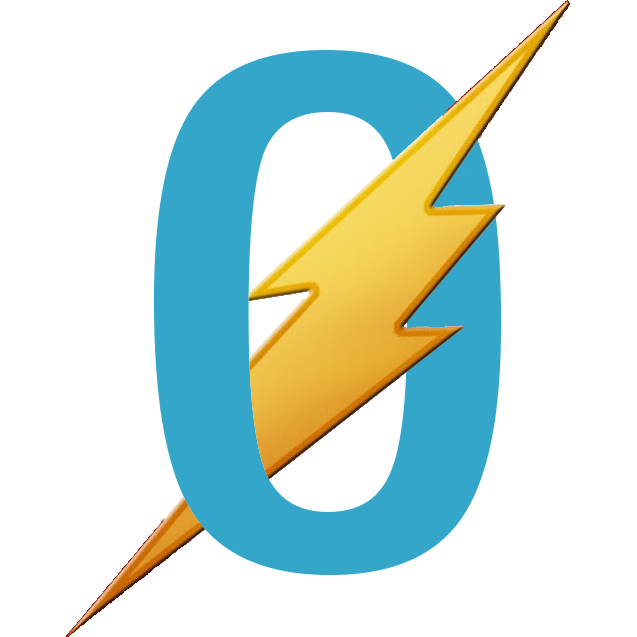
<style>
.page{position:relative;width:637px;height:637px;background:#ffffff}
.page>*{position:absolute;margin:0}
.t1{font:680px "Futura-CondensedMedium";letter-spacing:-0.025em;color:#33a6c9;scale:1.3 1}
</style>
<div class="page">
<p class="t1" style="left:153px;top:50px;width:349px;height:525px">O</p>
</div>
